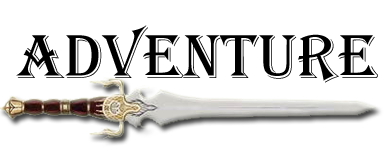
<style>
.page{position:relative;width:387px;height:156px;background:#ffffff}
.page>*{position:absolute;margin:0}
.t1{font:64px "Algerian";color:#000000}
</style>
<div class="page">
<p class="t1" style="left:16px;top:25px;width:362px;height:58px">Adventure</p>
</div>
